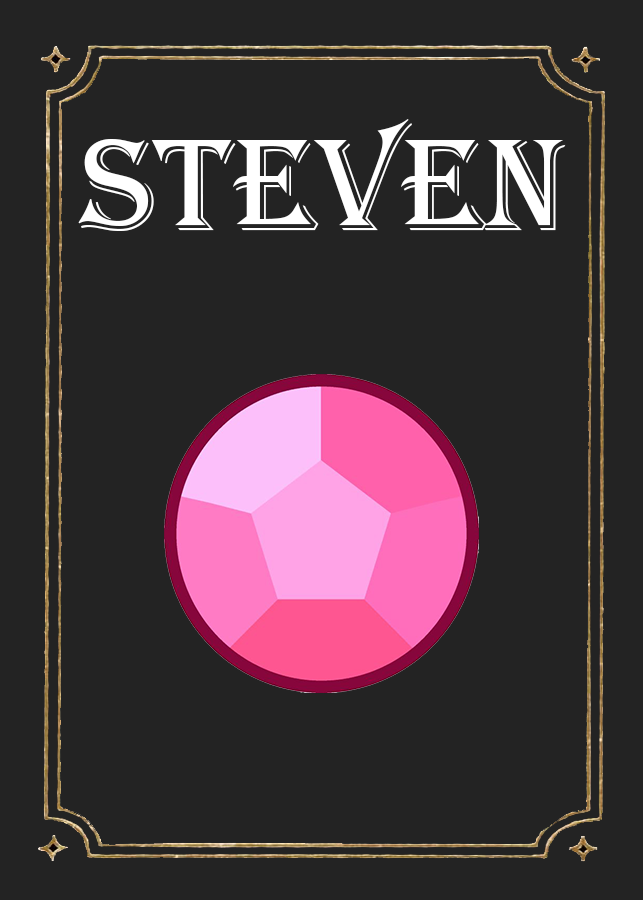
<style>
.page{position:relative;width:643px;height:900px;background:#232323}
.page>*{position:absolute;margin:0}
.t1{font:135px "Algerian";color:#ffffff}
</style>
<div class="page">
<p class="t1" style="left:78px;top:119px;width:488px;height:112px">Steven</p>
</div>
